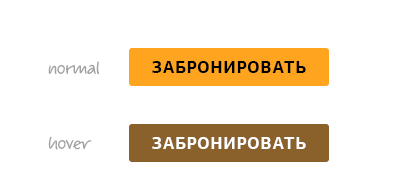
<style>
.page{position:relative;width:395px;height:191px;background:#ffffff}
.page>*{position:absolute;margin:0}
.t1{font:20px "ALSScripticus-Bold";letter-spacing:-0.05em;color:#a2a2a2}
.t2{font:17px "PFAgoraSansPro-Bold";letter-spacing:0.03em;color:#000000;text-transform:uppercase}
.t3{font:17px "PFAgoraSansPro-Bold";letter-spacing:0.03em;color:#ffffff;text-transform:uppercase}
</style>
<div class="page">
<p class="t1" style="left:48px;top:61px;width:52px;height:14px">normal</p>
<p class="t2" style="left:152px;top:61px;width:154px;height:12px">забронировать</p>
<p class="t1" style="left:48px;top:136px;width:44px;height:14px">hover</p>
<p class="t3" style="left:152px;top:137px;width:154px;height:12px">забронировать</p>
</div>
